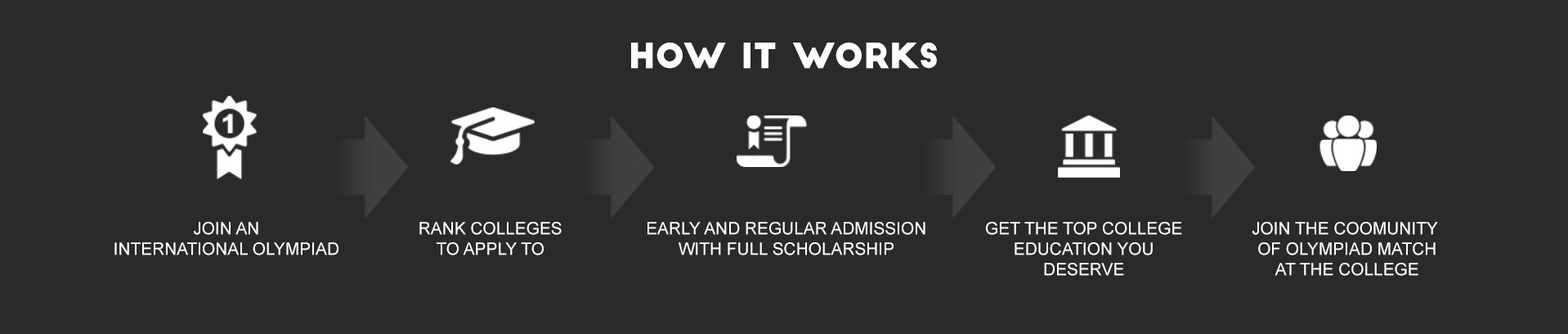
<style>
.page{position:relative;width:1568px;height:334px;background:#2a2a2a}
.page>*{position:absolute;margin:0}
.t1{font:34.1px "BigJohn";color:#ffffff}
.t2{font:17px "ArialMT";color:#ffffff}
</style>
<div class="page">
<p class="t1" style="left:631px;top:43px;width:306px;height:26px">HOW IT WORKS</p>
<p class="t2" style="left:114px;top:222px;width:224px;height:33px;text-align:center">JOIN AN <br>INTERNATIONAL OLYMPIAD</p>
<p class="t2" style="left:419px;top:222px;width:143px;height:33px;text-align:center">RANK COLLEGES<br>TO APPLY TO</p>
<p class="t2" style="left:647px;top:222px;width:278px;height:33px;text-align:center">EARLY AND REGULAR ADMISSION<br>WITH FULL SCHOLARSHIP</p>
<p class="t2" style="left:986px;top:222px;width:196px;height:54px;text-align:center">GET THE TOP COLLEGE<br>EDUCATION YOU<br>DESERVE</p>
<p class="t2" style="left:1252px;top:222px;width:186px;height:54px;text-align:center">JOIN THE COOMUNITY <br>OF OLYMPIAD MATCH<br>AT THE COLLEGE</p>
</div>
